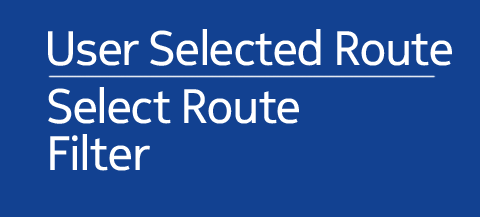
<style>
.page{position:relative;width:480px;height:217px;background:#124191}
.page>*{position:absolute;margin:0}
.t1{font:48px "NokiaPureHeadline-Regular";color:#ffffff}
.t2{font:48px "NokiaPureHeadline-Regular";letter-spacing:0.005em;color:#ffffff}
</style>
<div class="page">
<p class="t1" style="left:48px;top:29px;width:404px;height:37px">User Selected Route</p>
<p class="t1" style="left:48px;top:87px;width:251px;height:37px">Select Route</p>
<p class="t2" style="left:50px;top:134px;width:100px;height:37px">Filter</p>
</div>
